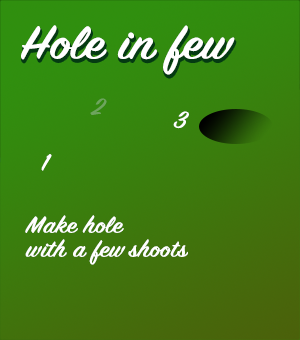
<style>
.page{position:relative;width:300px;height:340px}
.page>*{position:absolute;margin:0}
.t1{font:52.2px "SignPainter-HouseScriptSemibold";letter-spacing:0.01em;color:#ffffff;scale:1.15 1}
.t2{font:26.1px "SignPainter-HouseScriptSemibold";letter-spacing:0.01em;color:#6ea55d;scale:1.15 1}
.t3{font:26.1px "SignPainter-HouseScriptSemibold";letter-spacing:0.01em;color:#ffffff;scale:1.15 1}
.t4{font:26.1px/24px "SignPainter-HouseScriptSemibold";letter-spacing:0.01em;color:#ffffff;scale:1.15 1}
</style>
<div class="page">
<p class="t1" style="left:21px;top:25px;width:214px;height:50px">Hole in few</p>
<p class="t2" style="left:90px;top:98px;width:17px;height:17px">2</p>
<p class="t3" style="left:173px;top:111px;width:16px;height:18px">3</p>
<p class="t3" style="left:41px;top:154px;width:11px;height:17px">1</p>
<p class="t4" style="left:25px;top:215px;width:163px;height:50px">Make hole <br>with a few shoots</p>
</div>
